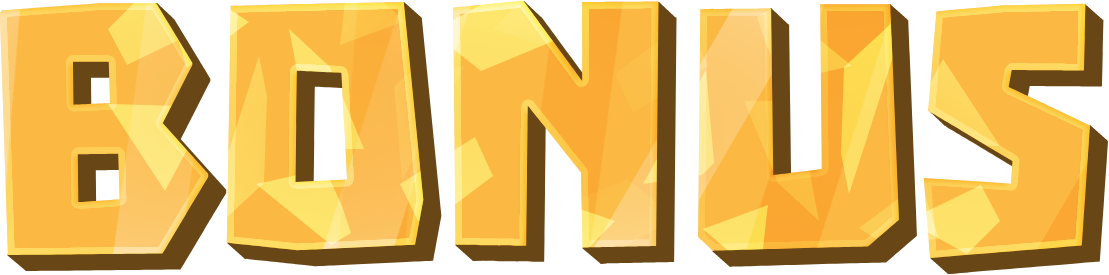
<style>
.page{position:relative;width:1109px;height:275px;background:#fbb842}
.page>*{position:absolute;margin:0}
.t1{font:399.6px "Troika";color:#fbb842}
</style>
<div class="page">
<p class="t1" style="left:0px;top:0px;width:1091px;height:258px">BONUS</p>
</div>
